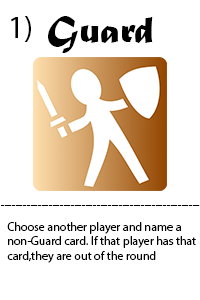
<style>
.page{position:relative;width:200px;height:300px;background:#ffffff}
.page>*{position:absolute;margin:0}
.t1{font:32px "MyriadPro-Regular";color:#000000}
.t2{font:40px "MaturaMTScriptCapitals";color:#000000}
.t3{font:12px "MyriadPro-Regular";color:#000000}
</style>
<div class="page">
<p class="t1" style="left:11px;top:16px;width:20px;height:26px">1)</p>
<p class="t2" style="left:48px;top:16px;width:105px;height:37px">Guard</p>
<p class="t3" style="left:1px;top:205px;width:199px;height:1px">------------------------------------------------------</p>
<p class="t3" style="left:7px;top:222px;width:189px;height:41px">Choose another player and name a <br>non-Guard card. If that player has that<br>card,they are out of the round</p>
</div>
